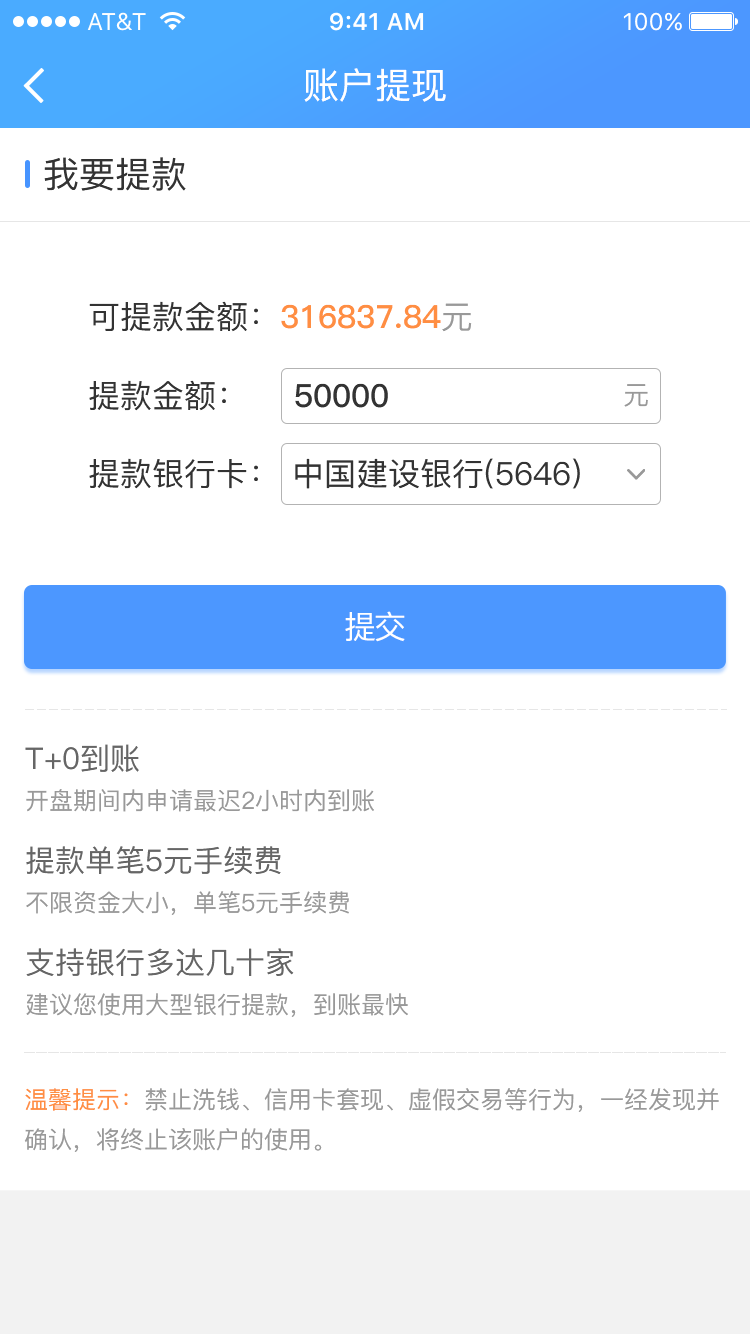
<style>
.page{position:relative;width:750px;height:1334px;background:#ffffff}
.page>*{position:absolute;margin:0}
.t1{font:36px "PingFang-SC-Medium";color:#ffffff}
.t2{font:36px "PingFang-SC-Medium";color:#333333}
.t3{font:32px "PingFang-SC-Bold";color:#ff8e42}
.t4{font:32px "PingFang-SC-Medium";color:#333333}
.t5{font:32px "PingFang-SC-Medium";color:#999999}
.t6{font:32px "PingFang-SC-Bold";color:#333333}
.t7{font:26px "PingFang-SC-Medium";color:#999999}
.t8{font:32px "PingFang-SC-Medium";letter-spacing:-0.06em;color:#ffffff}
.t9{font:24px/40px "PingFang-SC-Medium";color:#999999}
.t10{font:30px/40px "PingFang-SC-Medium";color:#666666}
.t11{font:24px/40px "PingFang-SC-Medium";color:#ff8e42}
</style>
<div class="page">
<p class="t1" style="left:304px;top:68px;width:142px;height:34px">账户提现</p>
<p class="t2" style="left:44px;top:157px;width:142px;height:34px">我要提款</p>
<p class="t3" style="left:89px;top:301px;width:383px;height:31px"><span class="t4">可提款金额：</span>316837.84<span class="t5">元</span></p>
<p class="t4" style="left:89px;top:380px;width:137px;height:31px">提款金额：</p>
<p class="t6" style="left:295px;top:383px;width:93px;height:25px">50000</p>
<p class="t7" style="left:624px;top:384px;width:24px;height:23px">元</p>
<p class="t4" style="left:89px;top:458px;width:169px;height:31px">提款银行卡：</p>
<p class="t4" style="left:295px;top:458px;width:285px;height:31px">中国建设银行(5646)</p>
<p class="t8" style="left:345px;top:611px;width:60px;height:31px">提交</p>
<p class="t9" style="left:25px;top:744px;width:349px;height:68px"><span class="t10">T+0到账<br></span>开盘期间内申请最迟2小时内到账</p>
<p class="t9" style="left:26px;top:846px;width:323px;height:69px"><span class="t10">提款单笔5元手续费<br></span>不限资金大小，单笔5元手续费</p>
<p class="t9" style="left:26px;top:948px;width:382px;height:69px"><span class="t10">支持银行多达几十家<br></span>建议您使用大型银行提款，到账最快</p>
<p class="t9" style="left:24px;top:1088px;width:695px;height:64px"><span class="t11">温馨提示：</span>禁止洗钱、信用卡套现、虚假交易等行为，一经发现并确认，将终止该账户的使用。</p>
</div>
